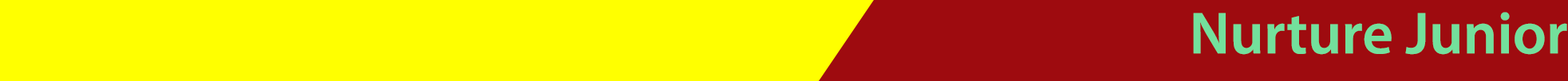
<style>
.page{position:relative;width:1568px;height:81px;background:#ffff00}
.page>*{position:absolute;margin:0}
.t1{font:59.8px "MyriadPro-Semibold";color:#73e09c}
</style>
<div class="page">
<p class="t1" style="left:1193px;top:12px;width:374px;height:43px">Nurture Junior</p>
</div>
